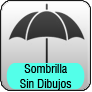
<style>
.page{position:relative;width:92px;height:92px}
.page>*{position:absolute;margin:0}
.t1{font:12px "Swiss721BT-RomanCondensed";color:#000000}
</style>
<div class="page">
<p class="t1" style="left:20px;top:64px;width:52px;height:26px;text-align:center">Sombrilla<br>Sin Dibujos</p>
</div>
